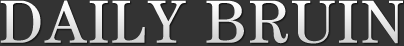
<style>
.page{position:relative;width:404px;height:46px;background:#333333}
.page>*{position:absolute;margin:0}
.t1{font:60.9px "CenturyStd-Book";letter-spacing:0.041em;color:#e9e9e9}
</style>
<div class="page">
<p class="t1" style="left:0px;top:0px;width:403px;height:44px">DAILY BRUIN</p>
</div>
